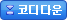
<style>
.page{position:relative;width:67px;height:20px}
.page>*{position:absolute;margin:0}
.t1{font:11px "Dotum";letter-spacing:-0.05em;color:#ffffff;font-weight:bold}
</style>
<div class="page">
<p class="t1" style="left:18px;top:5px;width:44px;height:10px">코디다운</p>
</div>
